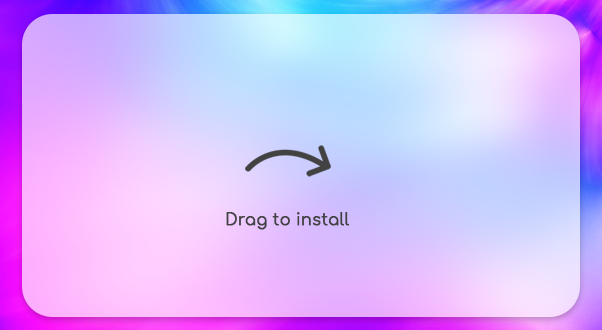
<style>
.page{position:relative;width:602px;height:330px}
.page>*{position:absolute;margin:0}
.t1{font:16px "Comfortaa-Regular";color:#424242;font-weight:bold}
</style>
<div class="page">
<p class="t1" style="left:226px;top:212px;width:124px;height:18px">Drag to install</p>
</div>
